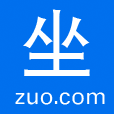
<style>
.page{position:relative;width:114px;height:114px;background:#006fed}
.page>*{position:absolute;margin:0}
.t1{font:72px "SIL-Hei-Med-Jian";color:#ffffff}
.t2{font:24px "SIL-Hei-Med-Jian";color:#ffffff}
</style>
<div class="page">
<p class="t1" style="left:23px;top:9px;width:67px;height:67px">坐</p>
<p class="t2" style="left:15px;top:92px;width:90px;height:13px">zuo.com</p>
</div>
